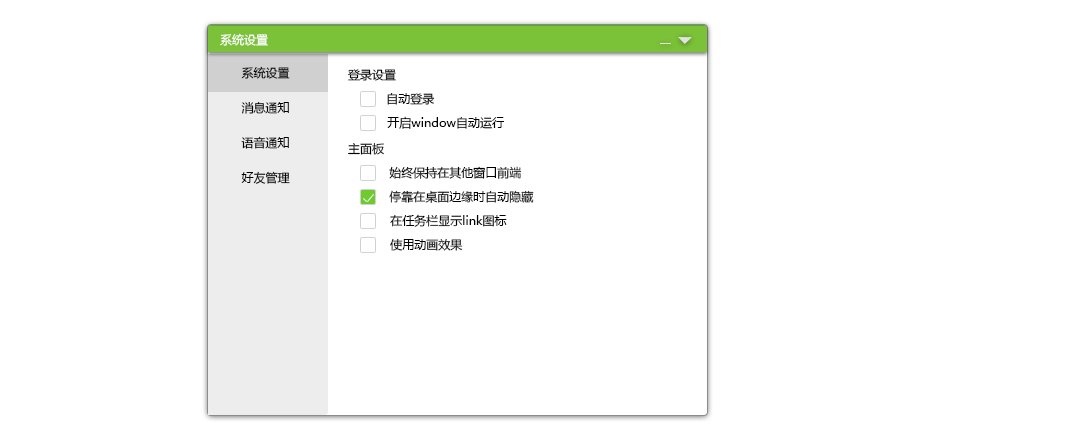
<style>
.page{position:relative;width:1092px;height:439px;background:#ffffff}
.page>*{position:absolute;margin:0}
.t1{font:12px "MicrosoftYaHei";color:#ffffff}
.t2{font:12px "MicrosoftYaHei";color:#000000}
</style>
<div class="page">
<p class="t1" style="left:220px;top:33px;width:48px;height:13px">系统设置</p>
<p class="t2" style="left:241px;top:66px;width:49px;height:13px">系统设置</p>
<p class="t2" style="left:348px;top:69px;width:48px;height:12px">登录设置</p>
<p class="t2" style="left:241px;top:101px;width:48px;height:13px">消息通知</p>
<p class="t2" style="left:387px;top:92px;width:48px;height:13px">自动登录</p>
<p class="t2" style="left:387px;top:116px;width:117px;height:13px">开启window自动运行</p>
<p class="t2" style="left:241px;top:136px;width:48px;height:13px">语音通知</p>
<p class="t2" style="left:348px;top:142px;width:36px;height:13px">主面板</p>
<p class="t2" style="left:241px;top:171px;width:49px;height:13px">好友管理</p>
<p class="t2" style="left:389px;top:166px;width:133px;height:13px">始终保持在其他窗口前端</p>
<p class="t2" style="left:389px;top:190px;width:145px;height:13px">停靠在桌面边缘时自动隐藏</p>
<p class="t2" style="left:390px;top:214px;width:117px;height:13px">在任务栏显示link图标</p>
<p class="t2" style="left:390px;top:238px;width:73px;height:13px">使用动画效果</p>
</div>
